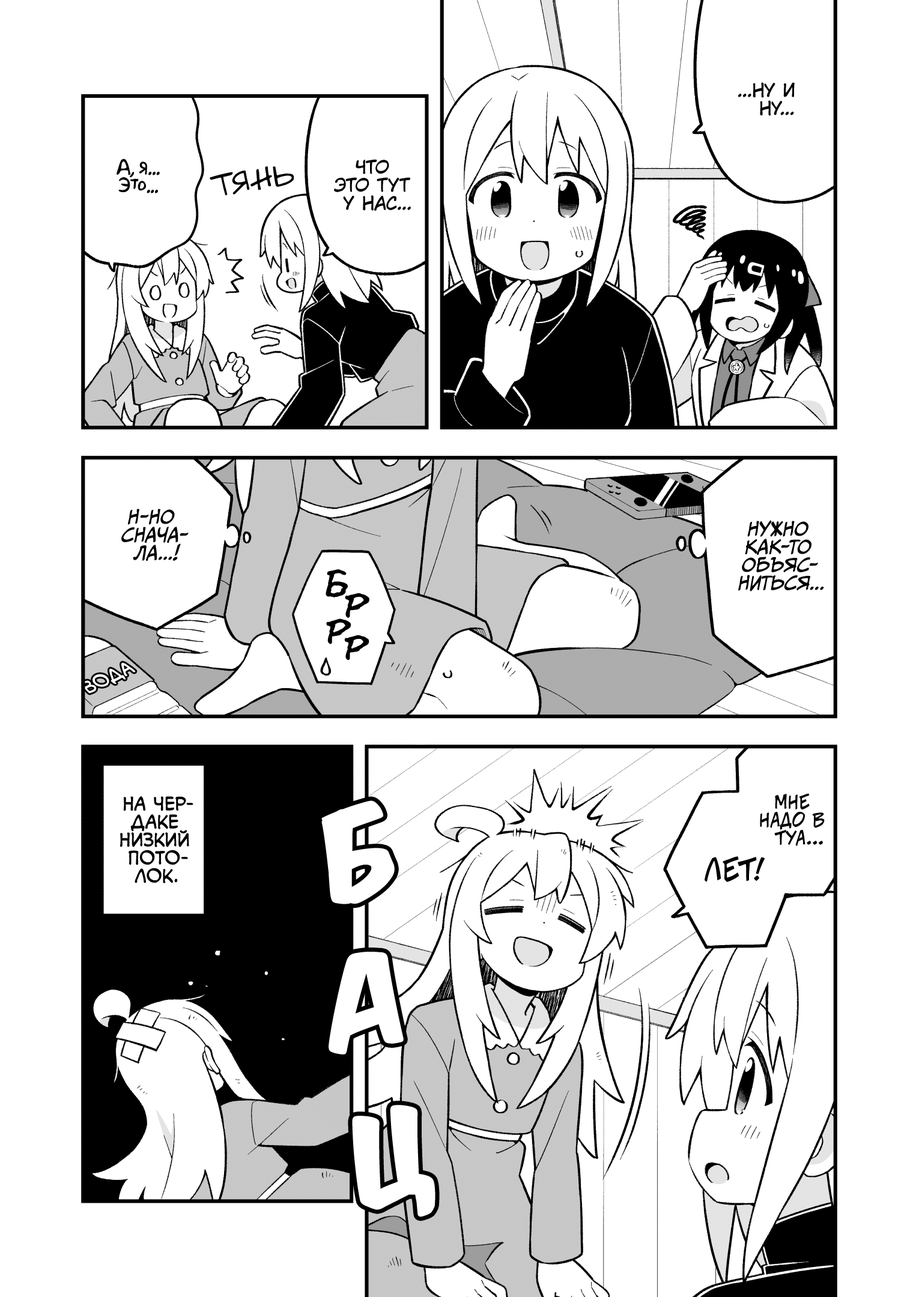
<style>
.page{position:relative;width:919px;height:1297px;background:#ffffff}
.page>*{position:absolute;margin:0}
.t1{font:18px "KuraiVoice2";color:#000000;text-transform:uppercase}
.t2{font:18px "AkbarPlain";color:#000000}
.t3{font:28.8px "v_Augie";color:#000000;text-transform:uppercase}
.t4{font:18px "CCMeanwhile";color:#000000;text-transform:uppercase;font-style:italic}
.t5{font:39.6px "el_CCEvilSchemes";color:#000000;text-transform:uppercase}
.t6{font:18.2px "v_CCMonologous";color:#ffffff;text-transform:uppercase}
.t7{font:18px "v_CCMonologous";color:#000000;text-transform:uppercase}
.t8{font:18px "v_CCJeffCampbell";color:#000000;text-transform:uppercase}
.t9{font:108.1px "KomikaTitle-AxisRUS-LAT";color:#ffffff}
.t10{font:28.8px "v_CCJeffCampbell";color:#000000;text-transform:uppercase}
</style>
<div class="page">
<p class="t1" style="left:738px;top:82px;width:57px;height:34px;text-align:center">...Ну и<br>ну...</p>
<p class="t2" style="left:117px;top:159px;width:43px;height:34px;text-align:center">А, я...<br>Это...</p>
<p class="t1" style="left:334px;top:159px;width:77px;height:52px;text-align:center">Что<br>это тут<br>у нас...</p>
<p class="t3" style="left:210px;top:166px;width:84px;height:30px;rotate:-9deg">тянь</p>
<p class="t4" style="left:121px;top:509px;width:68px;height:52px;text-align:center">Н-но<br>снача-<br>ла...!</p>
<p class="t4" style="left:738px;top:520px;width:86px;height:72px;text-align:center">Нужно<br>как-то<br>объяс-<br>ниться...</p>
<p class="t5" style="left:326px;top:569px;width:22px;height:29px;rotate:8deg">б</p>
<p class="t5" style="left:345px;top:593px;width:24px;height:25px;rotate:8deg">р</p>
<p class="t5" style="left:326px;top:619px;width:25px;height:26px;rotate:5deg">р</p>
<p class="t5" style="left:344px;top:635px;width:25px;height:26px;rotate:7deg">р</p>
<p class="t6" style="left:80px;top:663px;width:56px;height:31px;rotate:-26deg">вода</p>
<p class="t7" style="left:120px;top:797px;width:73px;height:87px;text-align:center">На чер-<br>даке<br>низкий<br>пото-<br>лок.</p>
<p class="t8" style="left:760px;top:794px;width:65px;height:52px;text-align:center">Мне<br>надо в<br>туа...</p>
<p class="t9" style="left:321px;top:801px;width:74px;height:104px;rotate:-13deg">б</p>
<p class="t10" style="left:705px;top:857px;width:60px;height:25px">лет!</p>
<p class="t9" style="left:329px;top:952px;width:75px;height:103px;rotate:-12deg">а</p>
<p class="t9" style="left:352px;top:1105px;width:83px;height:113px;rotate:-16deg">ц</p>
</div>
